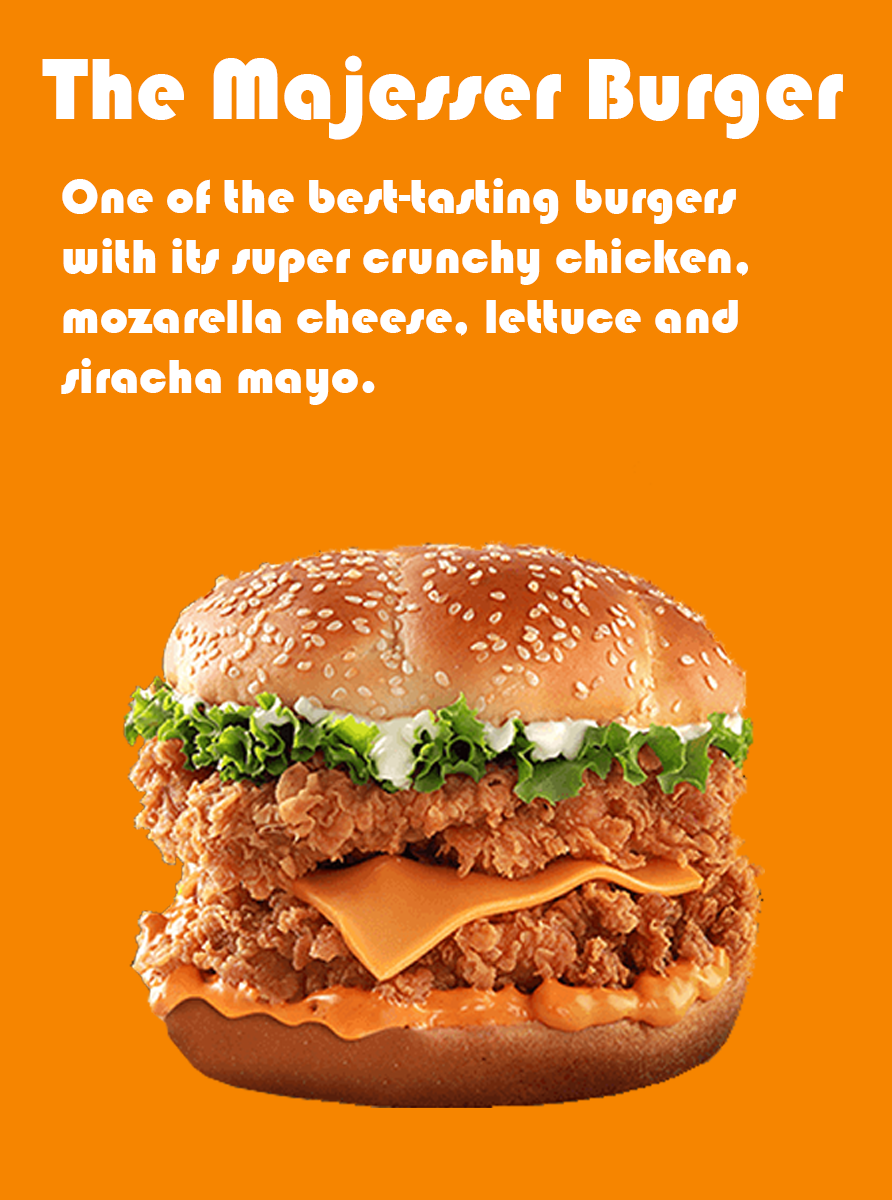
<style>
.page{position:relative;width:892px;height:1200px;background:#f68500}
.page>*{position:absolute;margin:0}
.t1{font:90px "Bauhaus93";color:#ffffff}
.t2{font:50px "Bauhaus93";color:#ffffff}
</style>
<div class="page">
<p class="t1" style="left:42px;top:55px;width:801px;height:85px">The Majesser Burger</p>
<p class="t2" style="left:61px;top:178px;width:687px;height:227px">One of the best-tasting burgers<br>with its super crunchy chicken,<br>mozarella cheese, lettuce and<br>siracha mayo.</p>
</div>
